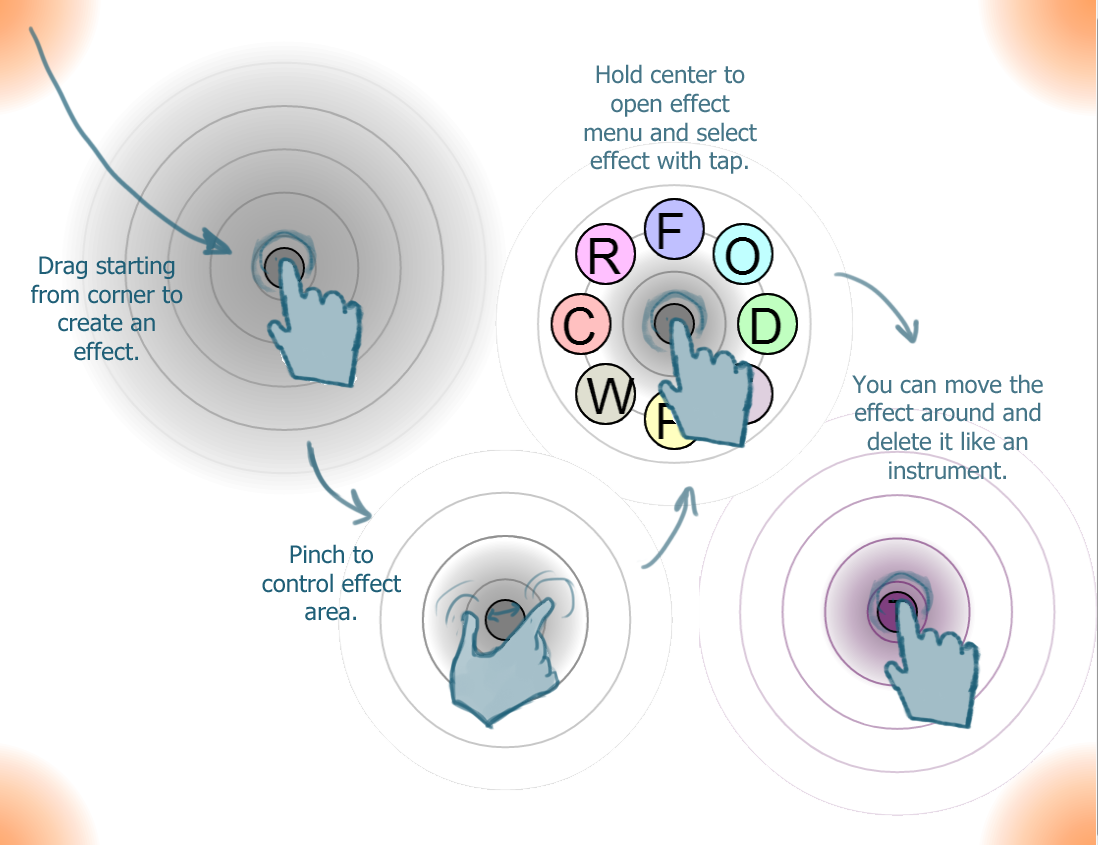
<style>
.page{position:relative;width:1098px;height:845px;background:#ffffff}
.page>*{position:absolute;margin:0}
.t1{font:23.9px "Tahoma";color:#457587}
.t2{font:23.9px "Tahoma";color:#1f5f77}
</style>
<div class="page">
<p class="t1" style="left:584px;top:64px;width:173px;height:110px;text-align:center">Hold center to open effect menu and select effect with tap.</p>
<p class="t2" style="left:31px;top:256px;width:152px;height:105px;text-align:center">Drag starting from corner to create an effect.</p>
<p class="t1" style="left:852px;top:374px;width:191px;height:106px;text-align:center">You can move the effect around and delete it like an instrument.</p>
<p class="t2" style="left:262px;top:544px;width:139px;height:77px;text-align:center">Pinch to control effect area.</p>
</div>
